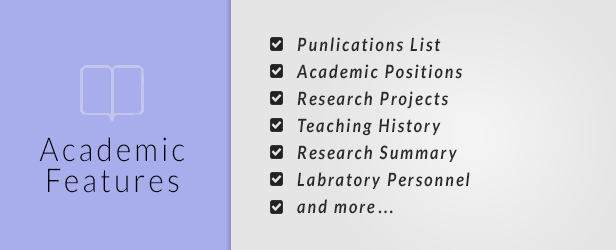
<style>
.page{position:relative;width:616px;height:250px;background:#a8adec}
.page>*{position:absolute;margin:0}
.t1{font:18.2px/27px "Lato-BoldItalic";letter-spacing:0.12em;color:#2b2b2b;scale:0.9 1}
.t2{font:32.6px/31px "Lato-Light";letter-spacing:0.12em;color:#000000;scale:0.9 1}
</style>
<div class="page">
<p class="t1" style="left:296px;top:37px;width:174px;height:177px;text-align:right">Punlications List<br>Academic Positions<br>Research Projects<br>Teaching History<br>Research Summary<br>Labratory Personnel<br>...and more</p>
<p class="t2" style="left:39px;top:137px;width:145px;height:56px;text-align:center">Academic<br>Features</p>
</div>
